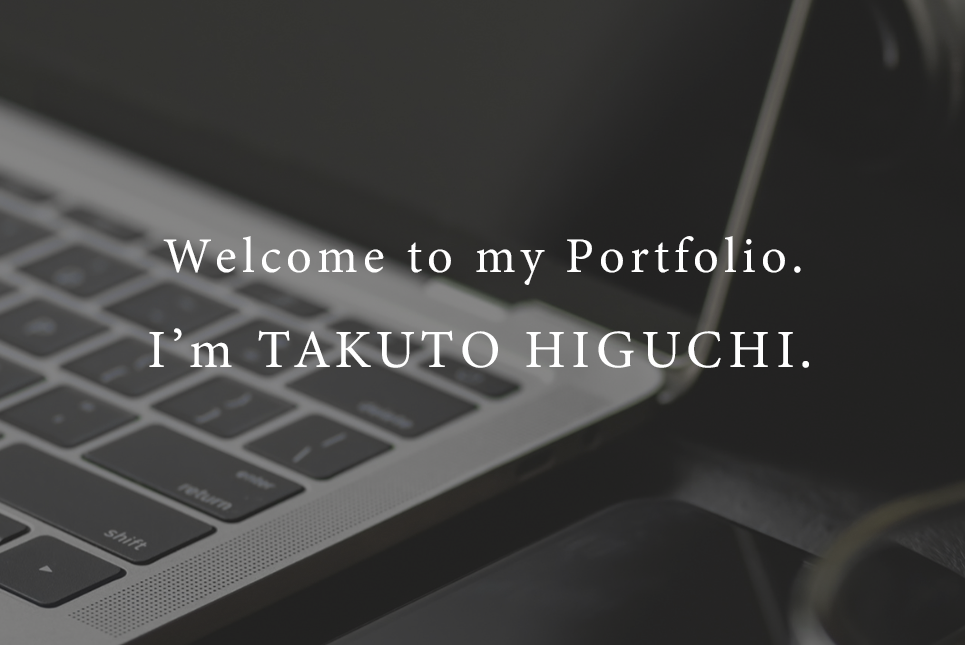
<style>
.page{position:relative;width:965px;height:645px}
.page>*{position:absolute;margin:0}
.t1{font:50px "MinionVariableConcept-Roman";letter-spacing:0.1em;color:#ffffff}
.t2{font:53.7px "MinionVariableConcept-Roman";letter-spacing:0.1em;color:#ffffff}
</style>
<div class="page">
<p class="t1" style="left:163px;top:236px;width:638px;height:49px">Welcome to my Portfolio.</p>
<p class="t2" style="left:149px;top:328px;width:660px;height:40px">I’m TAKUTO HIGUCHI.</p>
</div>
